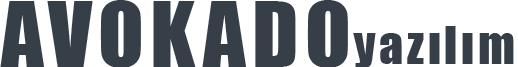
<style>
.page{position:relative;width:518px;height:67px;background:#363e47}
.page>*{position:absolute;margin:0}
.t1{font:84px "Impact";letter-spacing:0.075em;color:#363e47}
.t2{font:48px "Impact";letter-spacing:0.075em;color:#363e47}
</style>
<div class="page">
<p class="t1" style="left:0px;top:0px;width:348px;height:68px">AVOKADO</p>
<p class="t2" style="left:353px;top:26px;width:161px;height:42px">yazılım</p>
</div>
